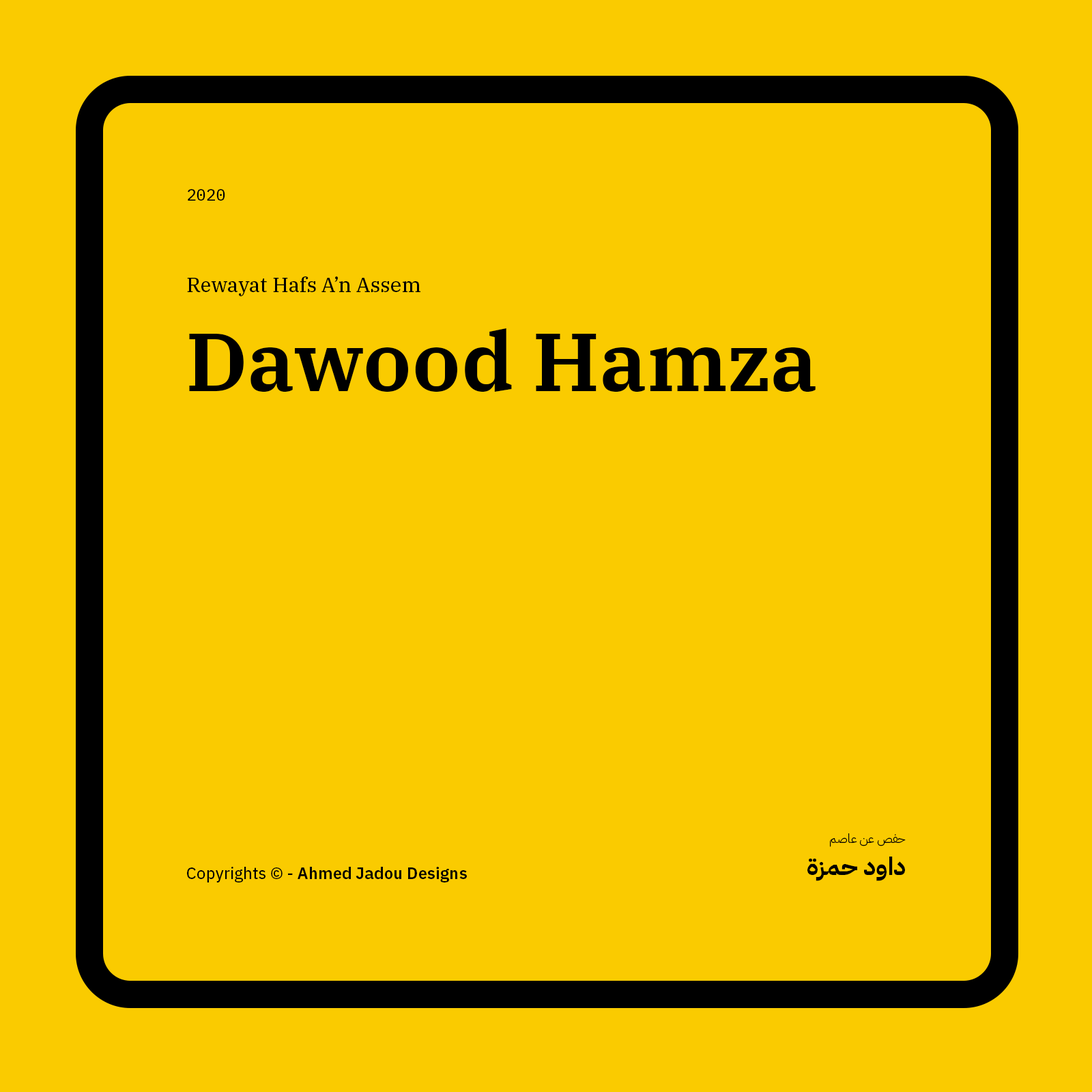
<style>
.page{position:relative;width:1092px;height:1092px;background:#facb00}
.page>*{position:absolute;margin:0}
.t1{font:16.4px "IBMPlexMono-Text";color:#000000}
.t2{font:20.5px "IBMPlexSerif-Text";color:#000000}
.t3{font:81.9px "IBMPlexSerif-SemiBold";color:#000000}
.t4{font:12.3px "IBMPlexArabic-Light";color:#000000}
.t5{font:24.6px "IBMPlexArabic-Bold";color:#000000}
.t6{font:16.4px "IBMPlexSans-SemiBold";color:#000000}
.t7{font:16.4px "IBMPlexSans-Text";color:#000000}
</style>
<div class="page">
<p class="t1" style="left:188px;top:189px;width:37px;height:12px">2020</p>
<p class="t2" style="left:187px;top:276px;width:233px;height:20px">Rewayat Hafs A’n Assem</p>
<p class="t3" style="left:189px;top:328px;width:627px;height:64px">Dawood Hamza</p>
<p class="t4" style="left:830px;top:833px;width:76px;height:14px">حفص عن عاصم</p>
<p class="t5" style="left:807px;top:857px;width:98px;height:24px">داود حمزة</p>
<p class="t6" style="left:187px;top:867px;width:280px;height:15px"><span class="t7">Copyrights © - </span>Ahmed Jadou Designs</p>
</div>
